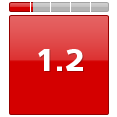
<style>
.page{position:relative;width:117px;height:117px;background:#d40000}
.page>*{position:absolute;margin:0}
.t1{font:36px "Colaborate-Bold";color:#ffffff;text-transform:uppercase}
</style>
<div class="page">
<p class="t1" style="left:38px;top:49px;width:45px;height:22px">1.2</p>
</div>
